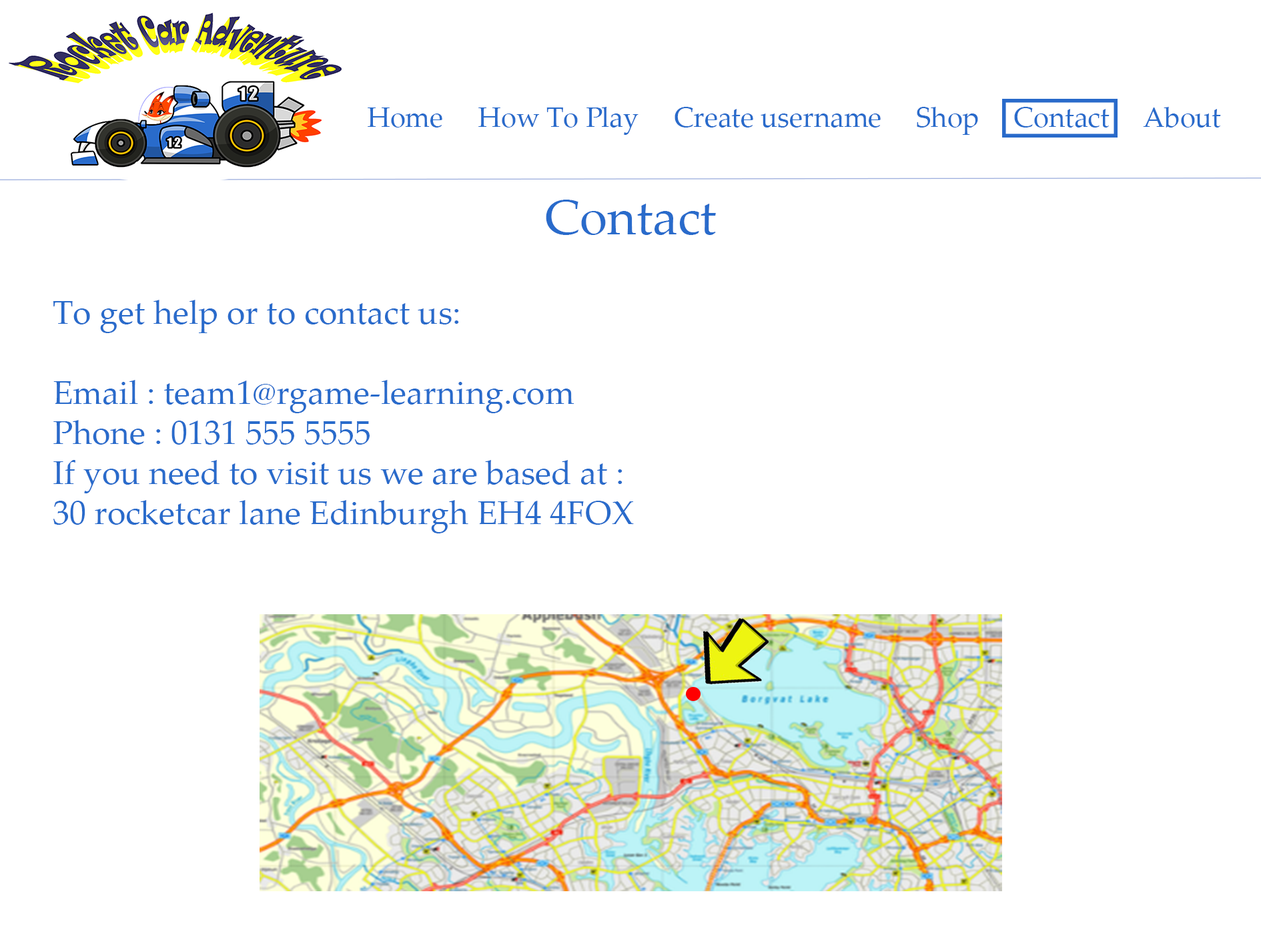
<style>
.page{position:relative;width:1261px;height:946px;background:#ffffff}
.page>*{position:absolute;margin:0}
.t1{font:27.8px "PalatinoLinotype-Roman";color:#296bcb}
.t2{font:50px "PalatinoLinotype-Roman";color:#296bcb}
.t3{font:33.4px "PalatinoLinotype-Roman";color:#296bcb}
</style>
<div class="page">
<p class="t1" style="left:368px;top:107px;width:853px;height:28px">Home     How To Play     Create username     Shop     Contact     About</p>
<p class="t2" style="left:546px;top:200px;width:170px;height:35px">Contact</p>
<p class="t3" style="left:53px;top:300px;width:581px;height:233px">To get help or to contact us:<br><br>Email : team1@rgame-learning.com<br>Phone : 0131 555 5555<br>If you need to visit us we are based at :<br>30 rocketcar lane Edinburgh EH4 4FOX</p>
</div>
